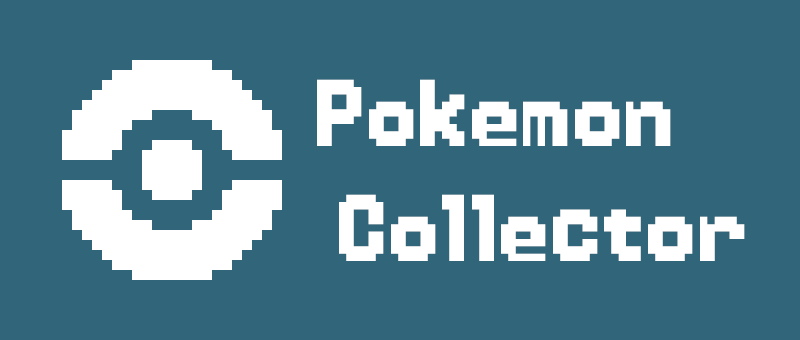
<style>
.page{position:relative;width:800px;height:340px;background:#31667a}
.page>*{position:absolute;margin:0}
.t1{font:96px "Power-Clear-Bold";color:#ffffff}
</style>
<div class="page">
<p class="t1" style="left:317px;top:79px;width:428px;height:182px">Pokemon<br> Collector</p>
</div>
